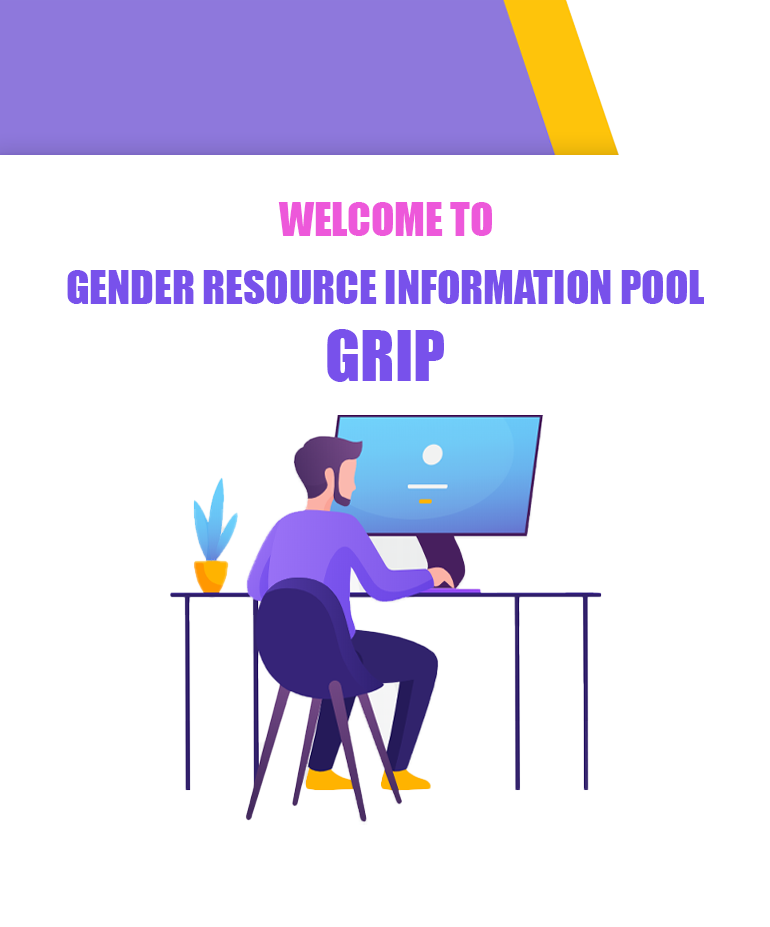
<style>
.page{position:relative;width:770px;height:927px;background:#ffffff}
.page>*{position:absolute;margin:0}
.t1{font:42.8px "Impact";color:#ed58da}
.t2{font:42.8px "Impact";color:#7851eb}
.t3{font:64px "Impact";color:#7851eb}
</style>
<div class="page">
<p class="t1" style="left:278px;top:202px;width:214px;height:34px">WELCOME TO</p>
<p class="t2" style="left:67px;top:270px;width:637px;height:112px;text-align:center">GENDER RESOURCE INFORMATION POOL<br><span class="t3">GRIP</span></p>
</div>
